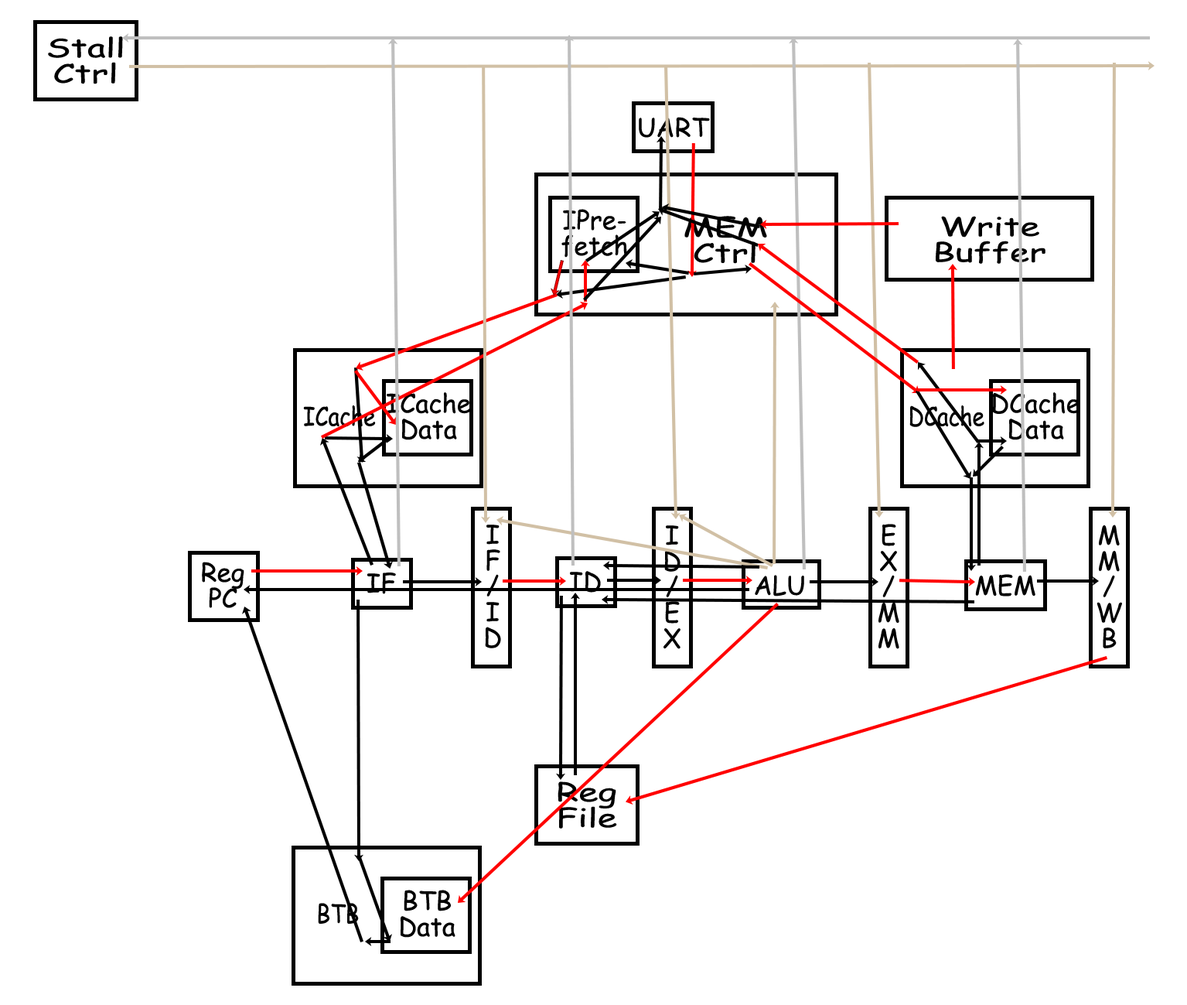
<style>
.page{position:relative;width:1187px;height:1005px;background:#ffffff}
.page>*{position:absolute;margin:0}
.t1{font:25.8px/25.8px "ComicSansMS";color:#000000;scale:1.38 1}
.t2{font:25.8px "ComicSansMS";color:#000000}
.t3{font:25.8px/25.8px "ComicSansMS";color:#000000}
.t4{font:25.8px "ComicSansMS";color:#000000;scale:0.85 1}
</style>
<div class="page">
<p class="t1" style="left:48px;top:36px;width:75px;height:48px;text-align:center">Stall<br>Ctrl</p>
<p class="t2" style="left:639px;top:117px;width:71px;height:21px">UART</p>
<p class="t3" style="left:561px;top:209px;width:66px;height:49px;text-align:center">IPre-<br>fetch</p>
<p class="t1" style="left:684px;top:216px;width:83px;height:48px;text-align:center">MEM<br>Ctrl</p>
<p class="t1" style="left:936px;top:216px;width:110px;height:48px;text-align:center">Write<br>Buffer</p>
<p class="t3" style="left:387px;top:392px;width:84px;height:48px;text-align:center">ICache<br>Data</p>
<p class="t3" style="left:993px;top:392px;width:87px;height:48px;text-align:center">DCache<br>Data</p>
<p class="t4" style="left:303px;top:405px;width:73px;height:22px">ICache</p>
<p class="t4" style="left:909px;top:405px;width:75px;height:22px">DCache</p>
<p class="t3" style="left:485px;top:524px;width:16px;height:124px;text-align:center">I<br>F<br>/<br>I<br>D</p>
<p class="t3" style="left:664px;top:525px;width:17px;height:124px;text-align:center">I<br>D<br>/<br>E<br>X</p>
<p class="t3" style="left:878px;top:524px;width:21px;height:125px;text-align:center">E<br>X<br>/<br>M<br>M</p>
<p class="t3" style="left:1097px;top:524px;width:25px;height:124px;text-align:center">M<br>M<br>/<br>W<br>B</p>
<p class="t3" style="left:202px;top:561px;width:42px;height:47px;text-align:center">Reg<br>PC</p>
<p class="t2" style="left:367px;top:572px;width:29px;height:22px">IF</p>
<p class="t2" style="left:570px;top:571px;width:31px;height:21px">ID</p>
<p class="t2" style="left:755px;top:575px;width:49px;height:21px">ALU</p>
<p class="t2" style="left:975px;top:574px;width:60px;height:22px">MEM</p>
<p class="t1" style="left:558px;top:781px;width:59px;height:47px;text-align:center">Reg<br>File</p>
<p class="t3" style="left:401px;top:889px;width:54px;height:48px;text-align:center">BTB<br>Data</p>
<p class="t4" style="left:318px;top:902px;width:41px;height:21px">BTB</p>
</div>
